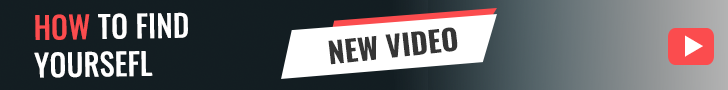
<style>
.page{position:relative;width:728px;height:90px;background:#131d22}
.page>*{position:absolute;margin:0}
.t1{font:30px/37.6px "Oswald-Regular";color:#ffffff;text-transform:uppercase;font-weight:bold}
.t2{font:30px/37.6px "Oswald-Regular";color:#fb4c4e;text-transform:uppercase;font-weight:bold}
.t3{font:29.2px "Oswald-Bold";color:#353535;text-transform:uppercase}
</style>
<div class="page">
<p class="t1" style="left:34px;top:12px;width:154px;height:66px;rotate:-1deg"><span class="t2">How</span> to find <br>yoursefl</p>
<p class="t3" style="left:328px;top:27px;width:130px;height:38px;rotate:-6deg">New video</p>
</div>
